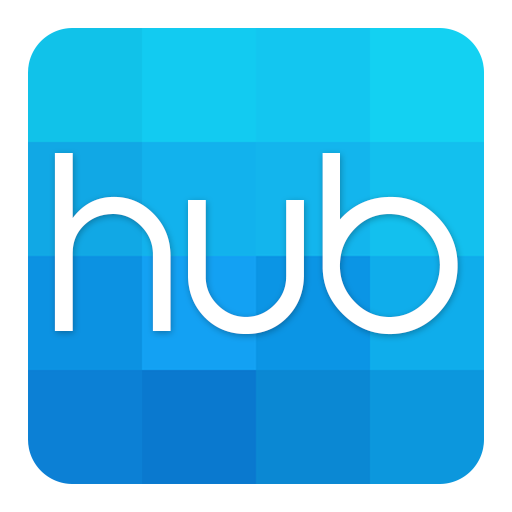
<style>
.page{position:relative;width:512px;height:512px;background:#ffffff}
.page>*{position:absolute;margin:0}
.t1{font:230px "AbeatbyKai";color:#ffffff}
</style>
<div class="page">
<p class="t1" style="left:54px;top:153px;width:404px;height:182px">hub</p>
</div>
